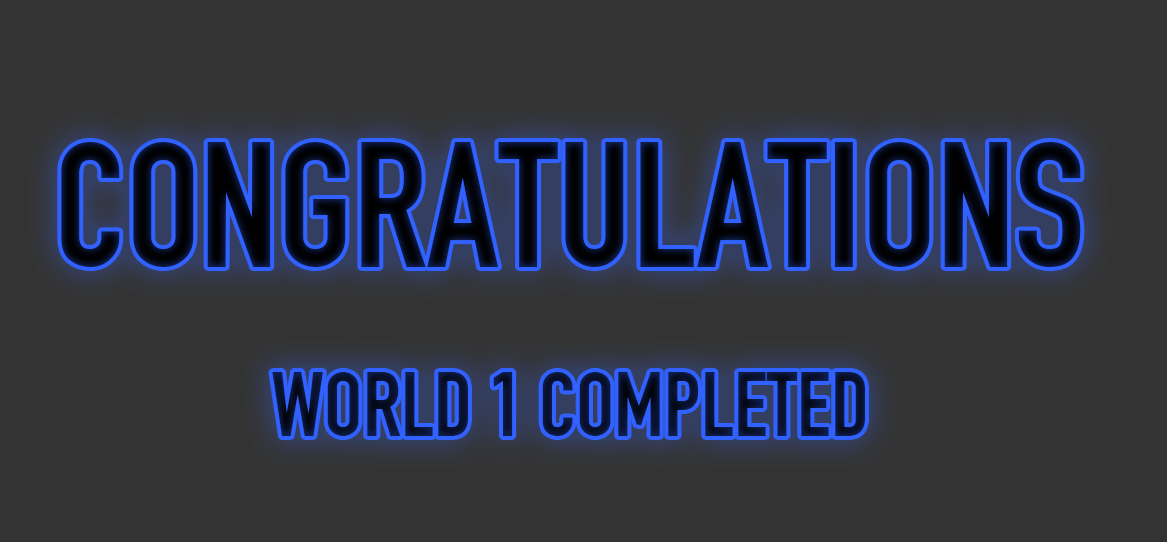
<style>
.page{position:relative;width:1167px;height:542px;background:#333333}
.page>*{position:absolute;margin:0}
.t1{font:175.4px "DINEngschrift";color:#040815}
.t2{font:90px "DINEngschrift";color:#0a1332}
</style>
<div class="page">
<p class="t1" style="left:61px;top:142px;width:1020px;height:125px">CONGRATULATIONS</p>
<p class="t2" style="left:272px;top:372px;width:593px;height:64px">WORLD 1 COMPLETED</p>
</div>
